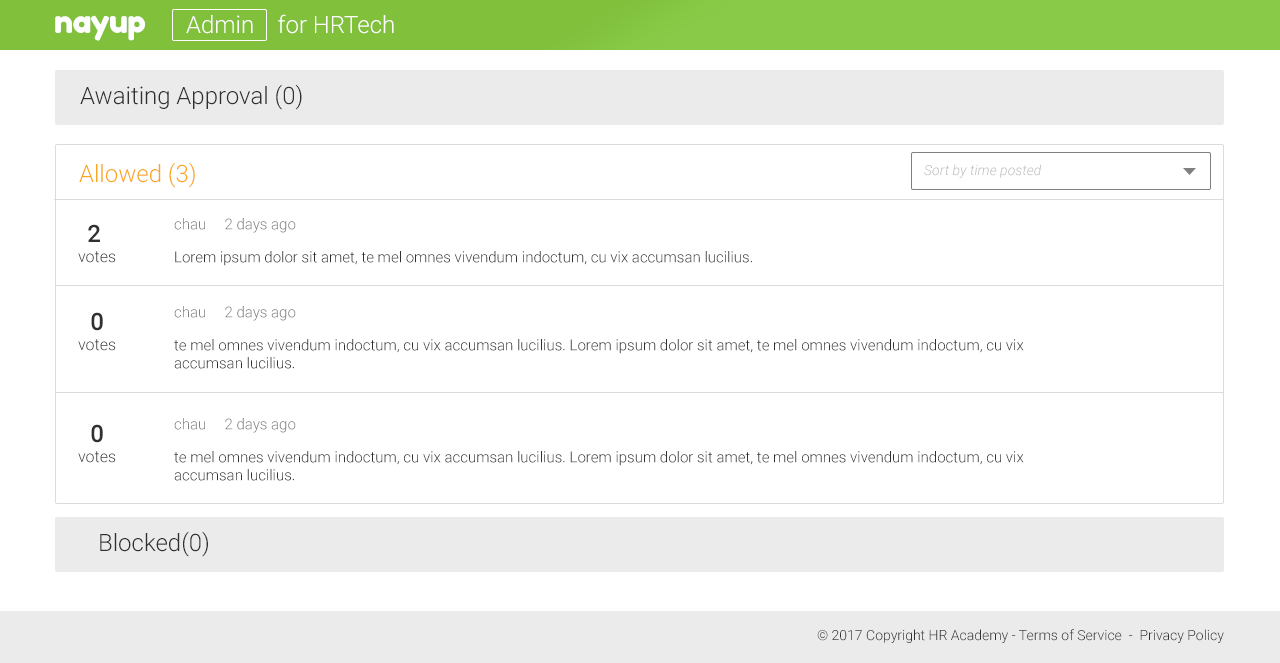
<style>
.page{position:relative;width:1280px;height:663px;background:#ffffff}
.page>*{position:absolute;margin:0}
.t1{font:32px "FredokaOne-Regular";letter-spacing:-0.025em;color:#fefefe}
.t2{font:24px "Roboto-Light";color:#ffffff}
.t3{font:24px "Roboto-Light";color:#303030}
.t4{font:24px "Roboto-Light";color:#faa61f}
.t5{font:14px "Roboto-LightItalic";color:#bebebe}
.t6{font:15px "Roboto-Light";color:#808080}
.t7{font:16px/20px "Roboto-Light";color:#303030}
.t8{font:24px/20px "Roboto-Medium";color:#303030}
.t9{font:15px "Roboto-Light";color:#303030}
.t10{font:14px "Roboto-Light";color:#303030}
</style>
<div class="page">
<p class="t1" style="left:55px;top:15px;width:90px;height:26px">nayup</p>
<p class="t2" style="left:186px;top:14px;width:208px;height:20px">Admin    for HRTech</p>
<p class="t3" style="left:80px;top:84px;width:222px;height:26px">Awaiting Approval (0)</p>
<p class="t4" style="left:79px;top:162px;width:116px;height:26px">Allowed (3)</p>
<p class="t5" style="left:924px;top:164px;width:118px;height:14px">Sort by time posted</p>
<p class="t6" style="left:174px;top:218px;width:122px;height:15px">chau     2 days ago</p>
<p class="t7" style="left:78px;top:224px;width:38px;height:39px;text-align:center"><span class="t8">2 <br></span>votes</p>
<p class="t9" style="left:175px;top:251px;width:577px;height:15px">Lorem ipsum dolor sit amet, te mel omnes vivendum indoctum, cu vix accumsan lucilius.</p>
<p class="t7" style="left:78px;top:312px;width:38px;height:39px;text-align:center"><span class="t8">0<br></span>votes</p>
<p class="t6" style="left:174px;top:306px;width:122px;height:15px">chau     2 days ago</p>
<p class="t9" style="left:174px;top:339px;width:850px;height:30px">te mel omnes vivendum indoctum, cu vix accumsan lucilius. Lorem ipsum dolor sit amet, te mel omnes vivendum indoctum, cu vix accumsan lucilius.</p>
<p class="t7" style="left:78px;top:424px;width:38px;height:39px;text-align:center"><span class="t8">0<br></span>votes</p>
<p class="t6" style="left:174px;top:418px;width:122px;height:15px">chau     2 days ago</p>
<p class="t9" style="left:174px;top:451px;width:850px;height:30px">te mel omnes vivendum indoctum, cu vix accumsan lucilius. Lorem ipsum dolor sit amet, te mel omnes vivendum indoctum, cu vix accumsan lucilius.</p>
<p class="t3" style="left:100px;top:531px;width:108px;height:26px">Blocked(0)</p>
<p class="t10" style="left:817px;top:629px;width:407px;height:14px">© 2017 Copyright HR Academy - Terms of Service  -  Privacy Policy</p>
</div>
